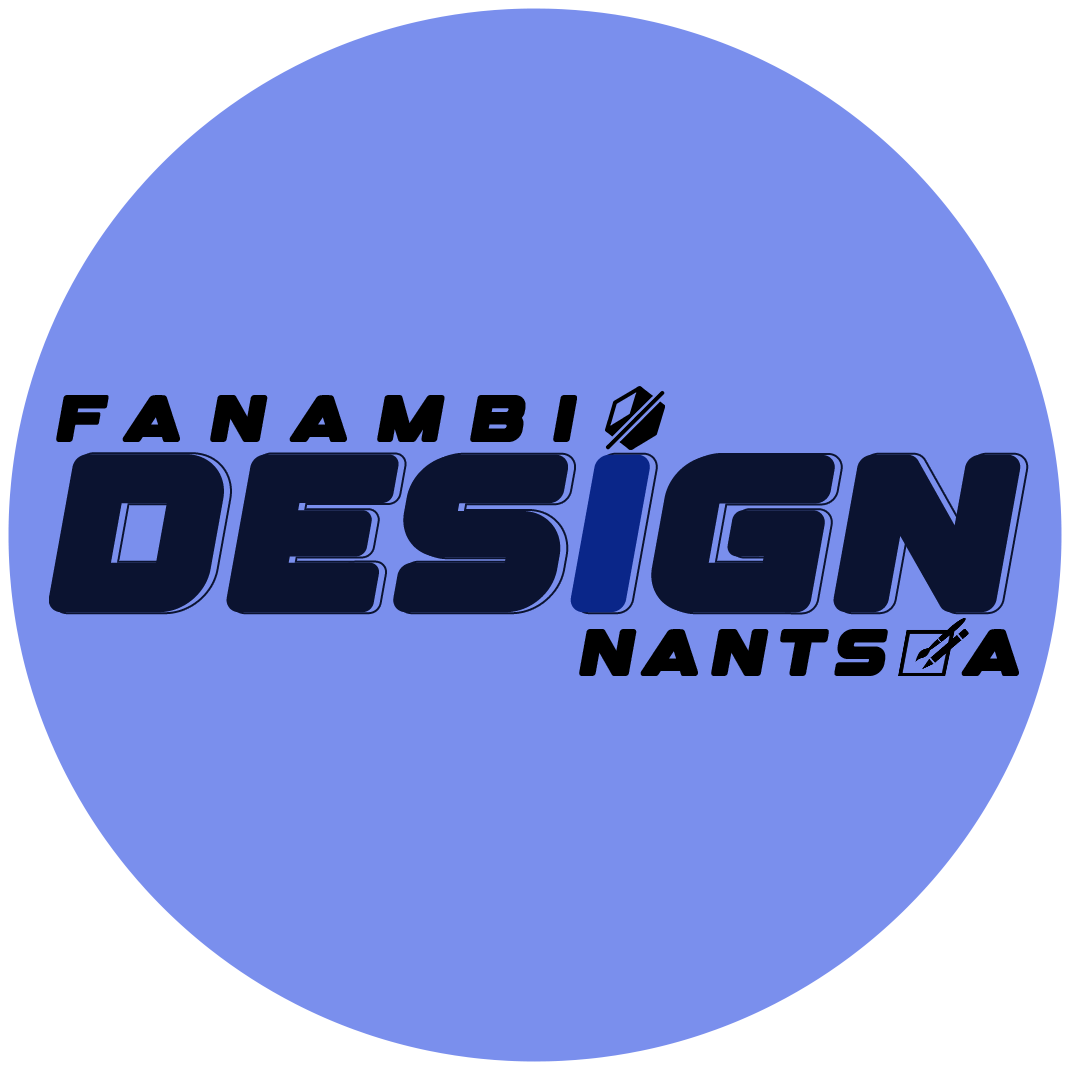
<style>
.page{position:relative;width:1070px;height:1070px;background:#7a8fed}
.page>*{position:absolute;margin:0}
.t1{font:71.6px "DesignerRegular";letter-spacing:0.36em;color:#000000;font-weight:bold}
.t2{font:232.3px "DesignerRegular";color:#0b1330;font-weight:bold}
.t3{font:232.3px "DesignerRegular";color:#0a268a;font-weight:bold}
.t4{font:71.6px "DesignerRegular";letter-spacing:0.12em;color:#000000;font-weight:bold}
.t5{font:71.6px "DesignerRegular";letter-spacing:0.12em;color:#7a8fee;font-weight:bold}
</style>
<div class="page">
<p class="t1" style="left:56px;top:395px;width:521px;height:47px">fanambi</p>
<p class="t2" style="left:49px;top:454px;width:972px;height:159px">des<span class="t3">i</span>gn</p>
<p class="t2" style="left:55px;top:454px;width:972px;height:159px">des<span class="t3">i</span>gn</p>
<p class="t4" style="left:579px;top:629px;width:440px;height:47px">nants<span class="t5">o</span>a</p>
</div>
